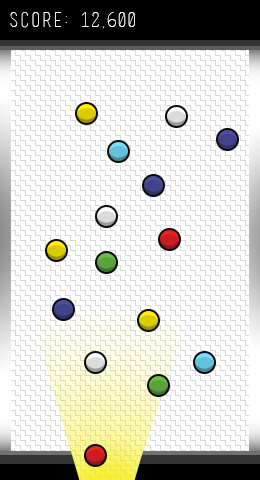
<style>
.page{position:relative;width:260px;height:480px;background:#ffffff}
.page>*{position:absolute;margin:0}
.t1{font:20px "basicl";letter-spacing:0.08em;color:#ffffff}
</style>
<div class="page">
<p class="t1" style="left:10px;top:12px;width:125px;height:17px">Score: 12,600</p>
</div>
